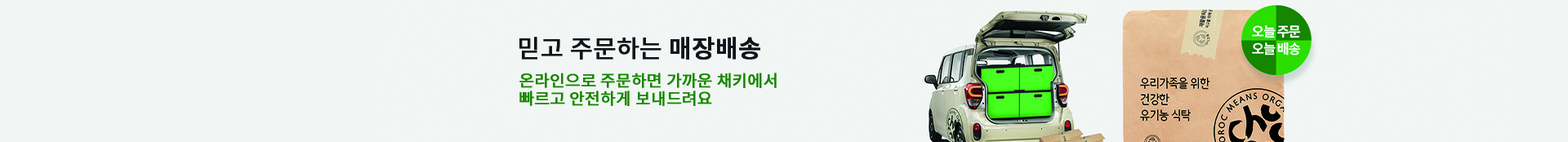
<style>
.page{position:relative;width:1568px;height:142px;background:#f1f5f4}
.page>*{position:absolute;margin:0}
.t1{font:24.5px "NotoSansKR-Regular";color:#0f1518;font-weight:bold}
.t2{font:24.5px "NotoSansKR-Medium";color:#0f1518;font-weight:bold}
.t3{font:16.3px/18px "NotoSansKR-Regular";color:#178600;font-weight:bold}
</style>
<div class="page">
<p class="t1" style="left:519px;top:37px;width:241px;height:23px">믿고 주문하는 <span class="t2">매장배송</span></p>
<p class="t3" style="left:519px;top:73px;width:258px;height:33px">온라인으로 주문하면 가까운 채키에서<br>빠르고 안전하게 보내드려요</p>
</div>
